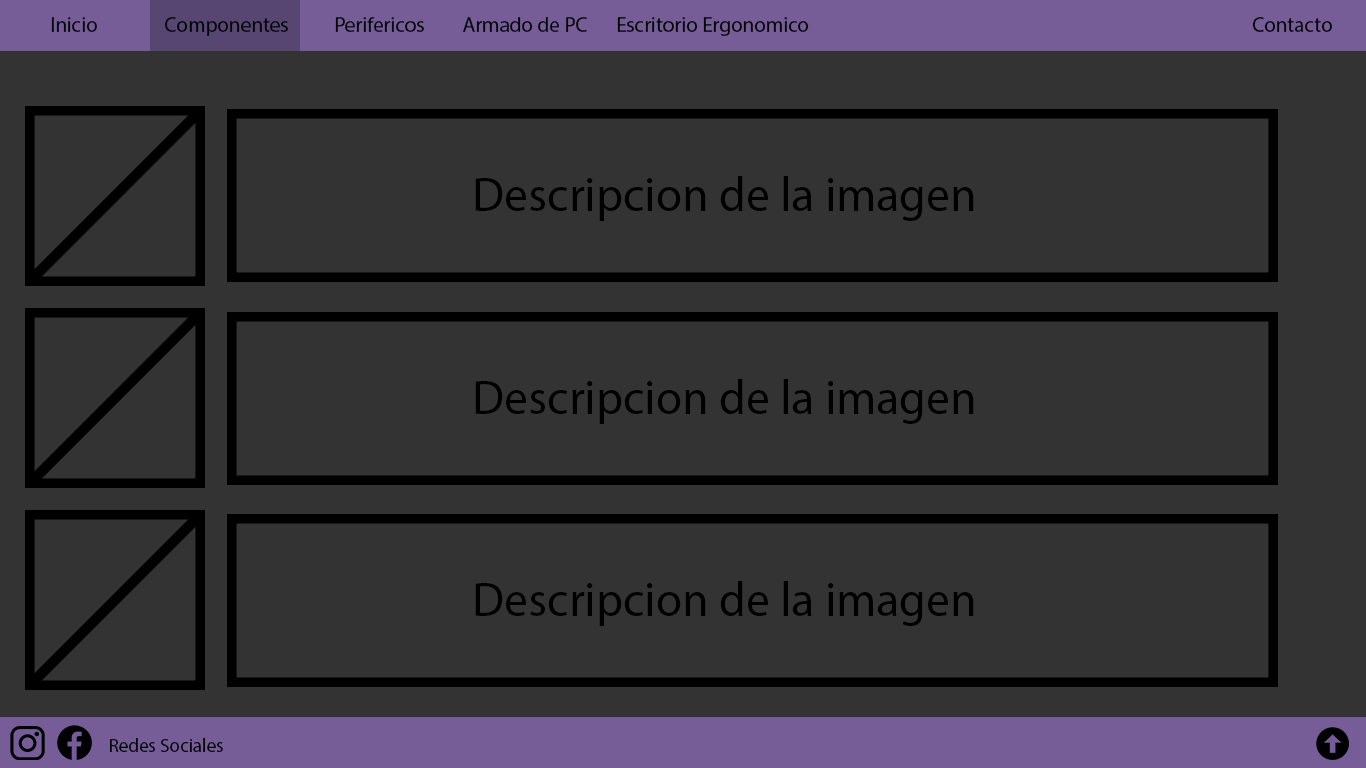
<style>
.page{position:relative;width:1366px;height:768px;background:#333333}
.page>*{position:absolute;margin:0}
.t1{font:21px "MyriadPro-Regular";color:#000000}
.t2{font:48px "MyriadPro-Regular";color:#000000}
.t3{font:19px "MyriadPro-Regular";color:#000000}
</style>
<div class="page">
<p class="t1" style="left:51px;top:17px;width:46px;height:15px">Inicio</p>
<p class="t1" style="left:165px;top:17px;width:123px;height:19px">Componentes</p>
<p class="t1" style="left:335px;top:17px;width:89px;height:15px">Perifericos</p>
<p class="t1" style="left:463px;top:17px;width:124px;height:15px">Armado de PC</p>
<p class="t1" style="left:617px;top:17px;width:192px;height:19px">Escritorio Ergonomico</p>
<p class="t1" style="left:1252px;top:17px;width:80px;height:15px">Contacto</p>
<p class="t2" style="left:475px;top:176px;width:499px;height:45px">Descripcion de la imagen</p>
<p class="t2" style="left:475px;top:379px;width:499px;height:45px">Descripcion de la imagen</p>
<p class="t2" style="left:475px;top:581px;width:499px;height:45px">Descripcion de la imagen</p>
<p class="t3" style="left:110px;top:738px;width:113px;height:14px">Redes Sociales</p>
</div>
